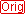
<style>
.page{position:relative;width:25px;height:14px;background:#ffffff}
.page>*{position:absolute;margin:0}
.t1{font:12px "ArialMT";color:#df0000}
</style>
<div class="page">
<p class="t1" style="left:1px;top:1px;width:23px;height:14px">Orig</p>
</div>
